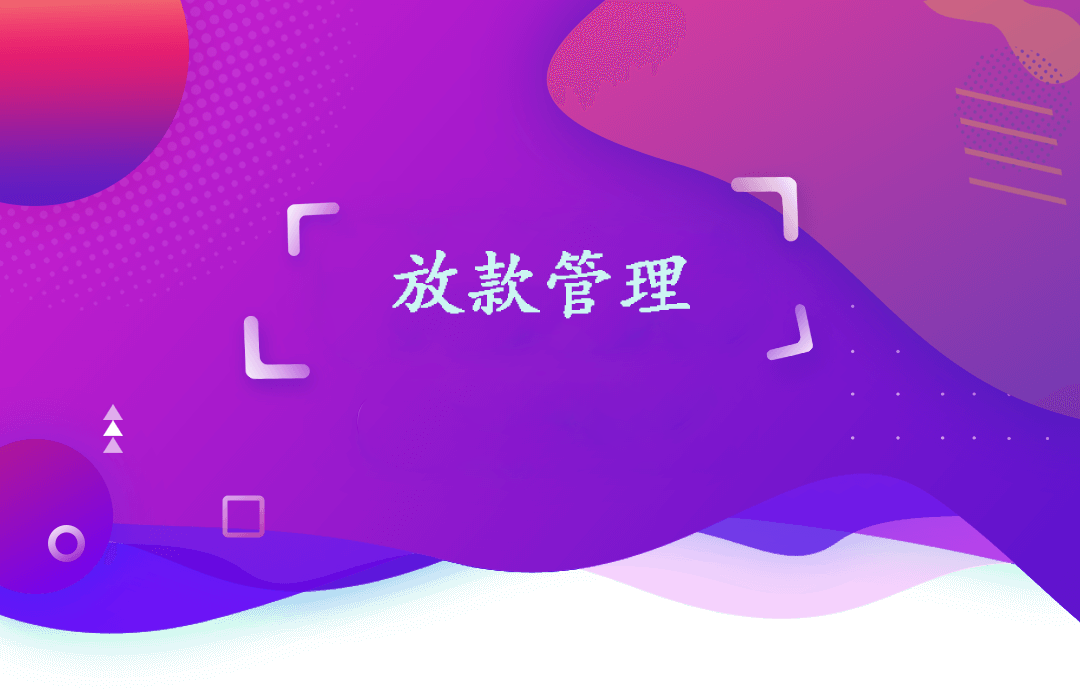
<style>
.page{position:relative;width:1080px;height:700px}
.page>*{position:absolute;margin:0}
.t1{font:75.4px "¿¬Ìå";color:#ccf5f2;text-transform:uppercase;font-weight:bold}
</style>
<div class="page">
<p class="t1" style="left:392px;top:250px;width:298px;height:69px">放款管理</p>
</div>
